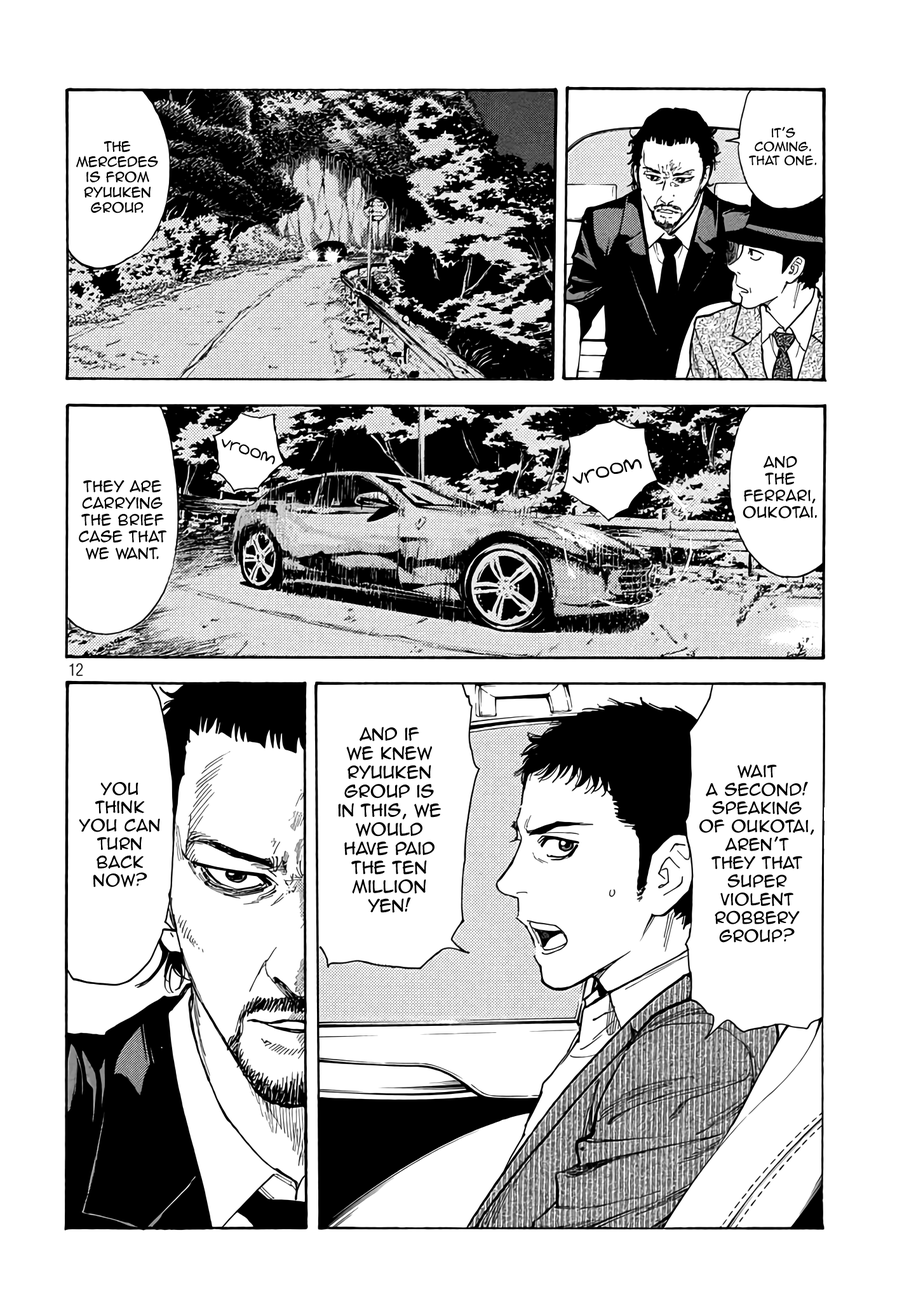
<style>
.page{position:relative;width:916px;height:1301px;background:#ffffff}
.page>*{position:absolute;margin:0}
.t1{font:11.4px "AnimeAce2.0BB";color:#000000}
.t2{font:12.7px "AnimeAce2.0BB";color:#000000}
.t3{font:17.2px "Augie";color:#000000}
.t4{font:21px "Augie";color:#000000}
.t5{font:14px "AnimeAce2.0BB";color:#000000}
.t6{font:15.9px "AnimeAce2.0BB";color:#000000}
.t7{font:15.3px "AnimeAce2.0BB";color:#000000}
</style>
<div class="page">
<p class="t1" style="left:749px;top:126px;width:68px;height:40px;text-align:center">it’s coming. That one.</p>
<p class="t2" style="left:76px;top:141px;width:82px;height:73px;text-align:center">The Mercedes <br>is from Ryuuken Group.</p>
<p class="t3" style="left:222px;top:439px;width:53px;height:26px;rotate:18deg">vroom</p>
<p class="t4" style="left:573px;top:459px;width:69px;height:25px;rotate:-15deg">vroom</p>
<p class="t5" style="left:743px;top:456px;width:74px;height:63px;text-align:center">And <br>the Ferrari, Oukotai.</p>
<p class="t5" style="left:79px;top:480px;width:88px;height:80px;text-align:center">They are carrying the brief case that we want.</p>
<p class="t6" style="left:338px;top:727px;width:103px;height:186px;text-align:center">And if <br>we knew ryuuken group is in this, we would have paid the ten million yen!</p>
<p class="t7" style="left:700px;top:764px;width:115px;height:179px;text-align:center">Wait <br>a second! Speaking of oukotai, aren’t <br>they that super violent robbery group?</p>
<p class="t7" style="left:79px;top:782px;width:81px;height:106px;text-align:center">You think you can turn back now?</p>
</div>
